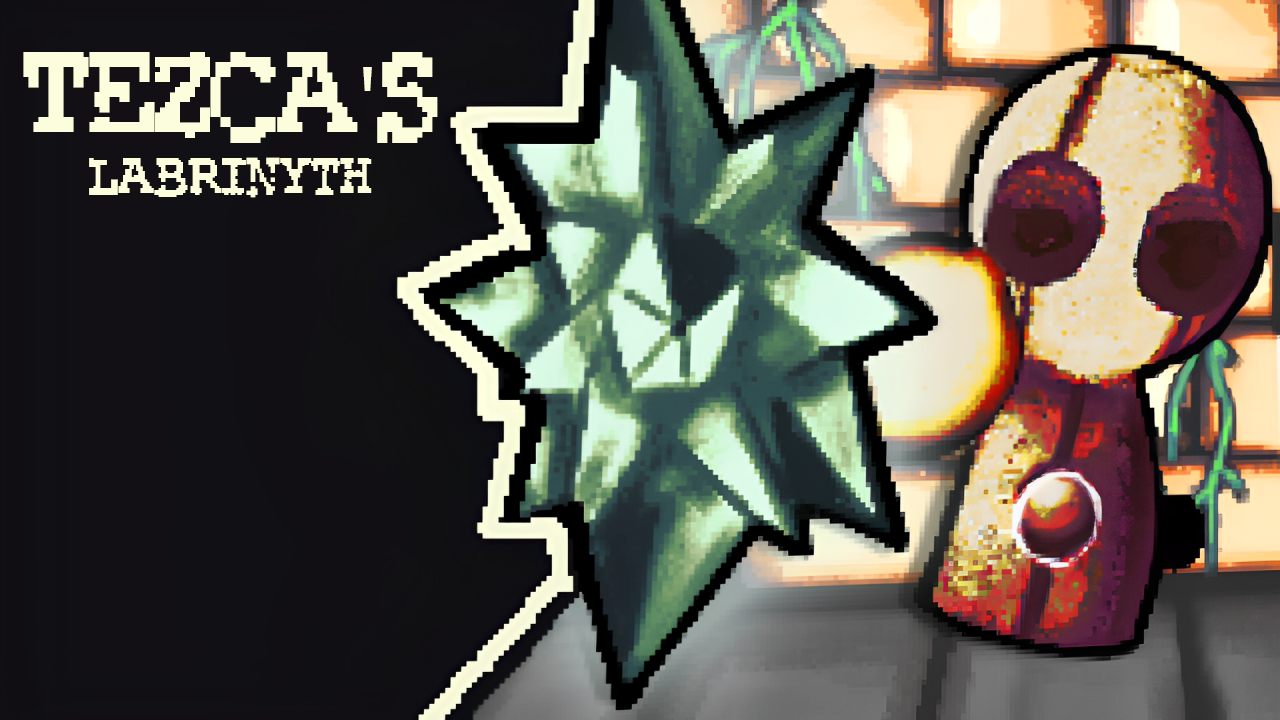
<style>
.page{position:relative;width:1280px;height:720px}
.page>*{position:absolute;margin:0}
.t1{font:100px "RubberBiscuitBold";color:#fcfddd}
.t2{font:100px "MyriadPro-Regular";color:#fcfddd}
.t3{font:44px "RubberBiscuitBold";color:#fcfddd}
</style>
<div class="page">
<p class="t1" style="left:23px;top:52px;width:415px;height:91px">Tezca<span class="t2">'</span>s</p>
<p class="t3" style="left:89px;top:157px;width:283px;height:41px">Labrinyth</p>
</div>
